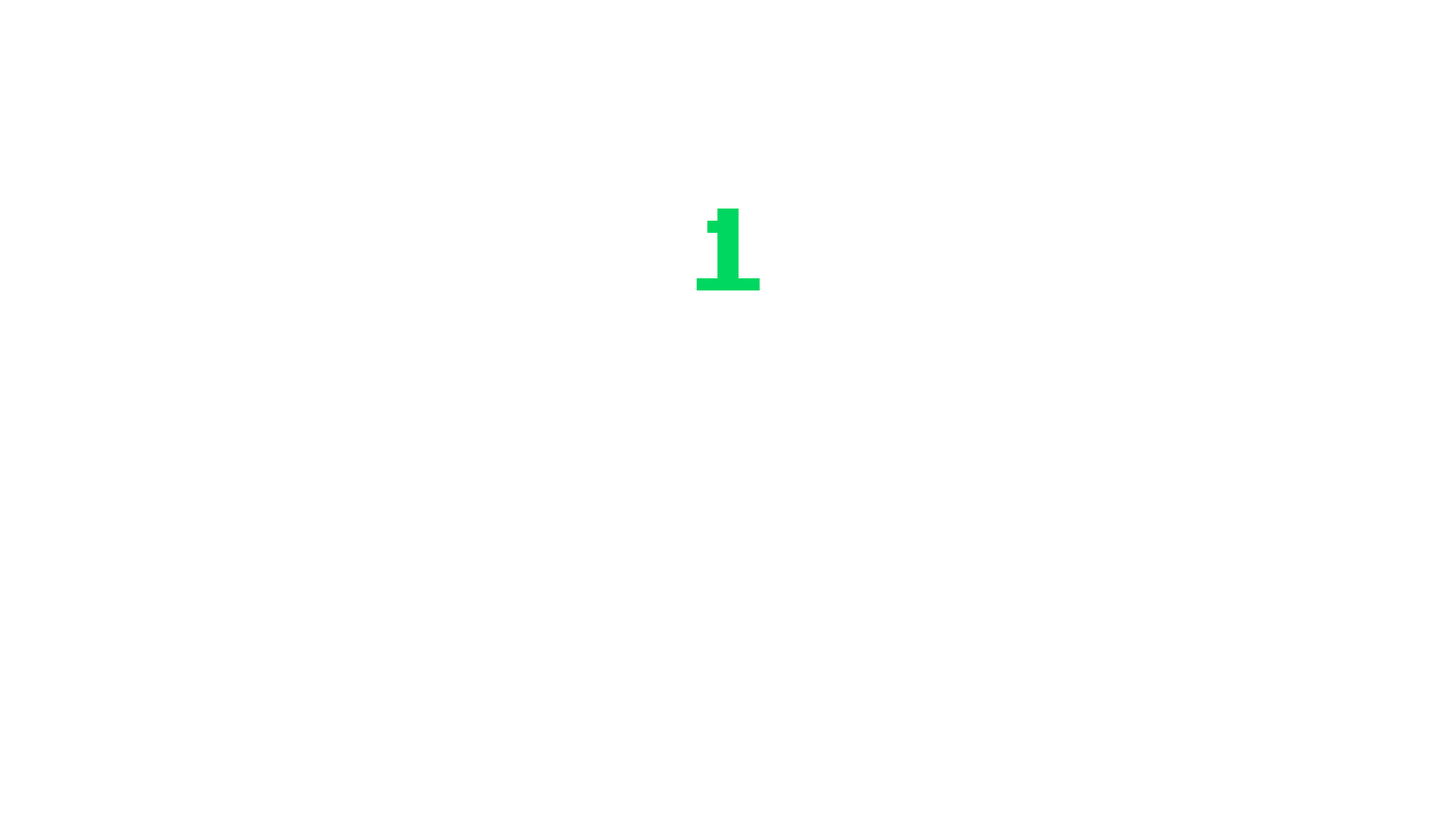
<style>
.page{position:relative;width:1456px;height:819px;background:#ffffff}
.page>*{position:absolute;margin:0}
.t1{font:164.1px "ArcadeClassic";color:#00d760;scale:0.9 1}
</style>
<div class="page">
<p class="t1" style="left:696px;top:209px;width:64px;height:81px">1</p>
</div>
